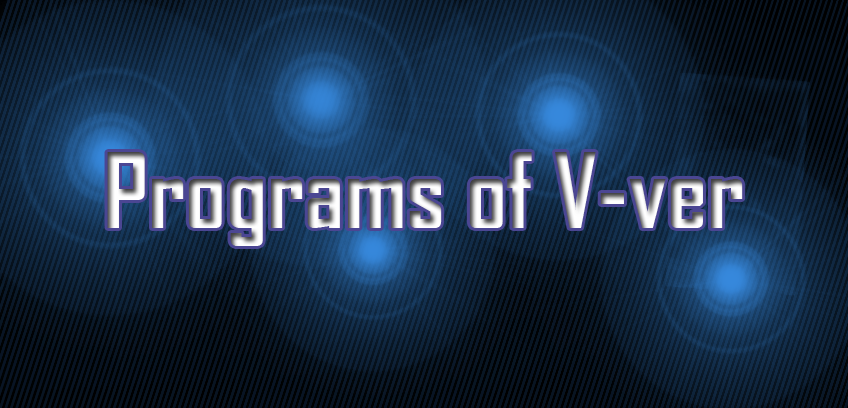
<style>
.page{position:relative;width:848px;height:408px}
.page>*{position:absolute;margin:0}
.t1{font:100px "AgencyFB-Bold"}
</style>
<div class="page">
<p class="t1" style="left:107px;top:152px;width:636px;height:94px">Programs of V-ver</p>
</div>
